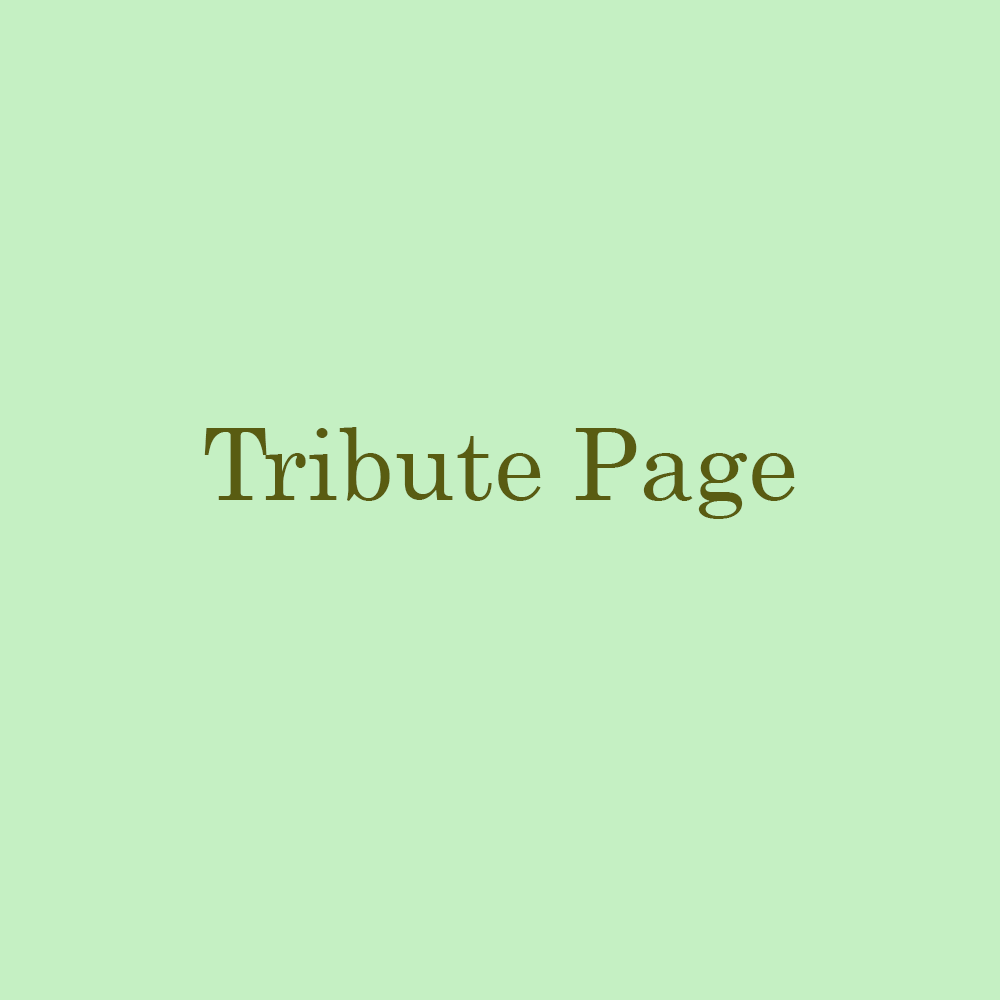
<style>
.page{position:relative;width:1000px;height:1000px;background:#c5f0c3}
.page>*{position:absolute;margin:0}
.t1{font:100px "Century";color:#595c12}
</style>
<div class="page">
<p class="t1" style="left:204px;top:427px;width:591px;height:92px">Tribute Page</p>
</div>
